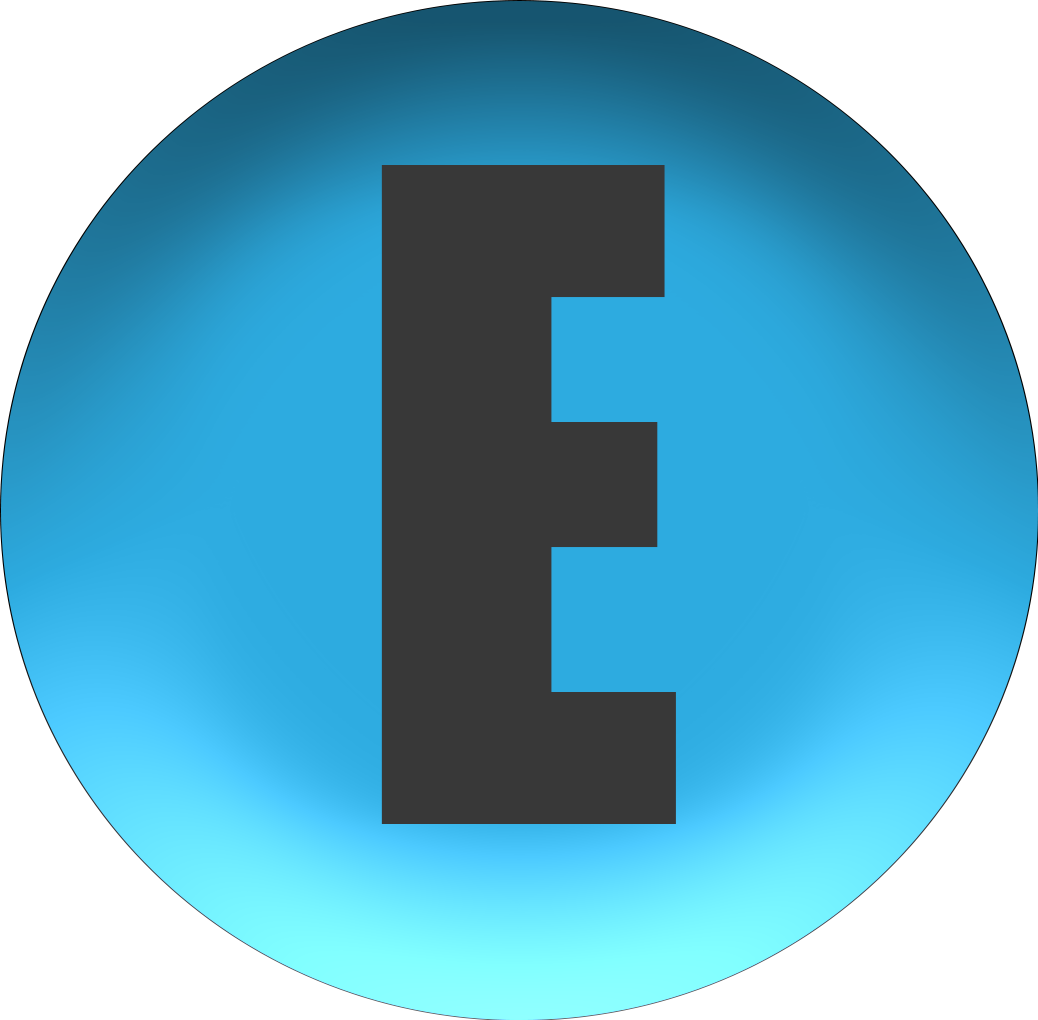
<style>
.page{position:relative;width:1038px;height:1020px;background:#ffffff}
.page>*{position:absolute;margin:0}
.t1{font:833.3px "Impact";letter-spacing:-0.04em;color:#383838;text-transform:uppercase}
.t2{font:833.3px "MyriadPro-Regular";letter-spacing:-0.04em;color:#000000;text-transform:uppercase}
</style>
<div class="page">
<p class="t1" style="left:381px;top:165px;width:295px;height:659px"><span class="t2"><br><br><br><br><br><br><br><br><br><br><br><br><br><br><br><br><br><br><br><br><br><br><br><br><br><br><br><br><br><br><br></span>E</p>
</div>
